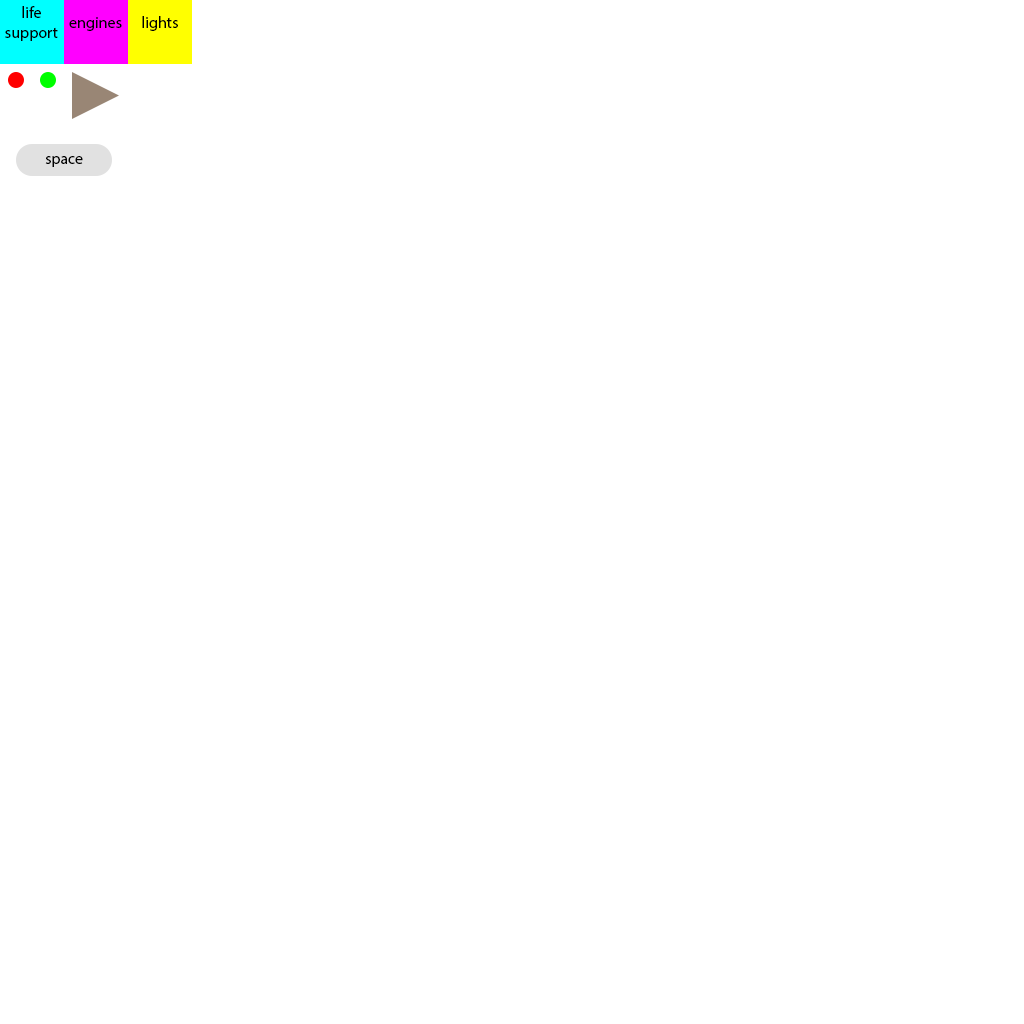
<style>
.page{position:relative;width:1024px;height:1024px;background:#ffffff}
.page>*{position:absolute;margin:0}
.t1{font:16px "MyriadPro-Regular";color:#000000}
</style>
<div class="page">
<p class="t1" style="left:5px;top:6px;width:53px;height:35px;text-align:center">life<br>support</p>
<p class="t1" style="left:69px;top:17px;width:53px;height:14px">engines</p>
<p class="t1" style="left:142px;top:16px;width:36px;height:15px">lights</p>
<p class="t1" style="left:45px;top:156px;width:38px;height:11px">space</p>
</div>
